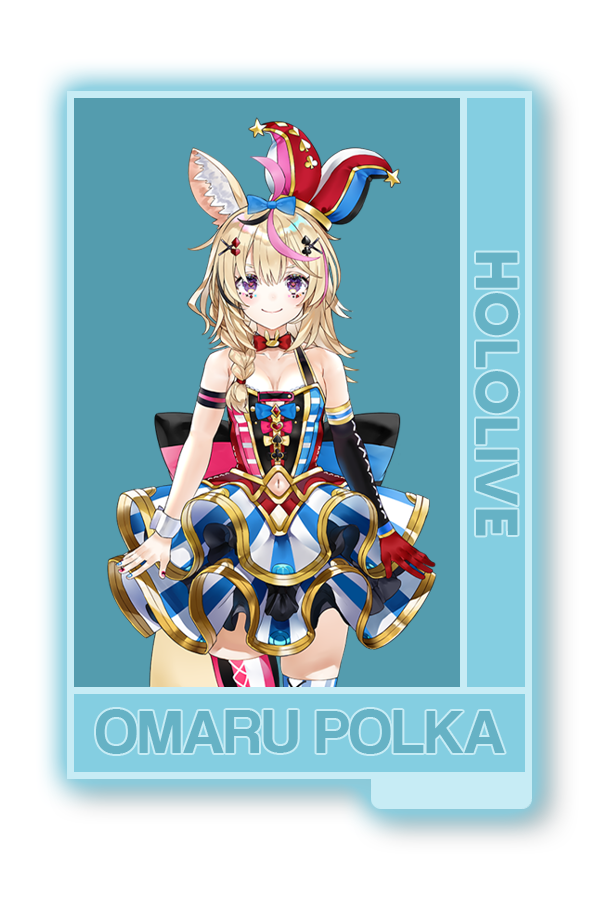
<style>
.page{position:relative;width:600px;height:900px;background:#ffffff}
.page>*{position:absolute;margin:0}
.t1{font:59.2px "MADETOMMY-Bold";color:#66b2c5}
.t2{font:64.4px "CoolveticaRg-Regular";color:#66b2c5}
</style>
<div class="page">
<p class="t1" style="left:475px;top:252px;width:44px;height:284px;rotate:90deg">HOLOLIVE</p>
<p class="t2" style="left:96px;top:709px;width:409px;height:45px">OMARU POLKA</p>
</div>
